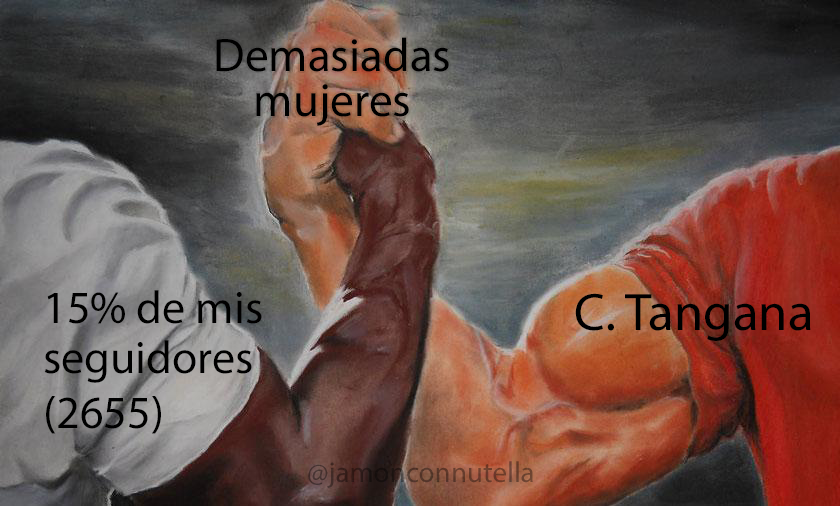
<style>
.page{position:relative;width:840px;height:506px}
.page>*{position:absolute;margin:0}
.t1{font:47.2px "MyriadPro-Regular";color:#000000}
.t2{font:46.1px "MyriadPro-Regular";color:#000000}
.t3{font:53px "MyriadPro-Regular";color:#000000}
.t4{font:29.1px "MyriadPro-Regular"}
</style>
<div class="page">
<p class="t1" style="left:216px;top:37px;width:233px;height:89px;text-align:center">Demasiadas<br>mujeres</p>
<p class="t2" style="left:44px;top:290px;width:218px;height:144px">15% de mis<br>seguidores<br>(2655)</p>
<p class="t3" style="left:575px;top:293px;width:236px;height:48px">C. Tangana</p>
<p class="t4" style="left:308px;top:461px;width:225px;height:27px">@jamonconnutella</p>
</div>
